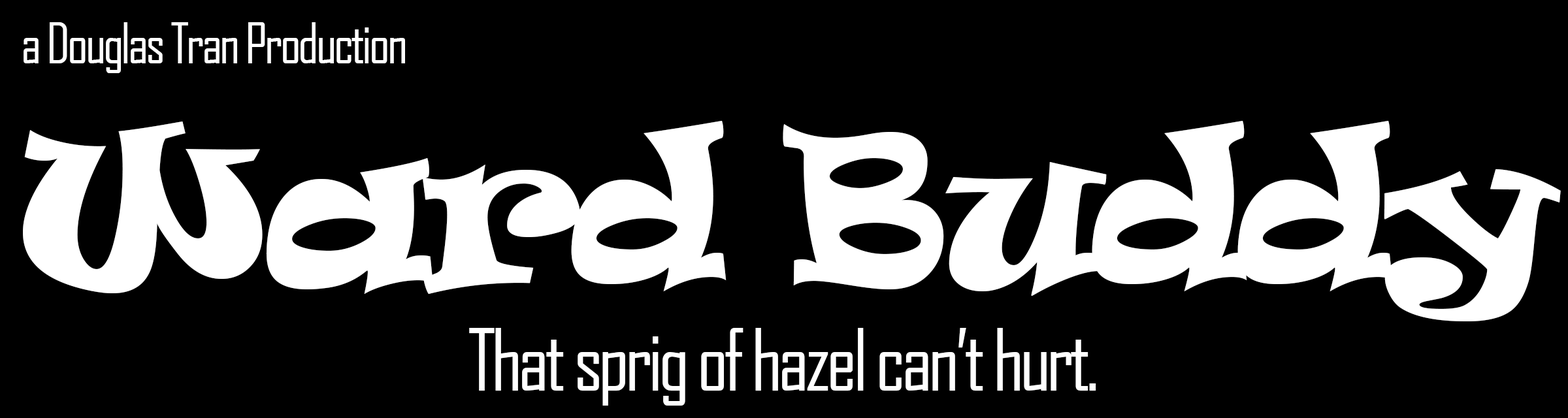
<style>
.page{position:relative;width:1568px;height:418px;background:#000000}
.page>*{position:absolute;margin:0}
.t1{font:54.4px "AgencyFB-Reg";letter-spacing:-0.05em;color:#ffffff}
.t2{font:202.5px "Ravie";letter-spacing:-0.05em;color:#ffffff}
.t3{font:81.7px "AgencyFB-Reg";letter-spacing:-0.05em;color:#ffffff}
</style>
<div class="page">
<p class="t1" style="left:24px;top:22px;width:381px;height:51px">a Douglas Tran Production</p>
<p class="t2" style="left:23px;top:121px;width:1538px;height:200px">Ward Buddy</p>
<p class="t3" style="left:469px;top:328px;width:627px;height:78px">That sprig of hazel can’t hurt.</p>
</div>
